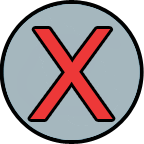
<style>
.page{position:relative;width:144px;height:144px;background:#a5b7be}
.page>*{position:absolute;margin:0}
.t1{font:125.3px "ArialMT";color:#ed3838}
</style>
<div class="page">
<p class="t1" style="left:30px;top:29px;width:83px;height:90px">X</p>
</div>
